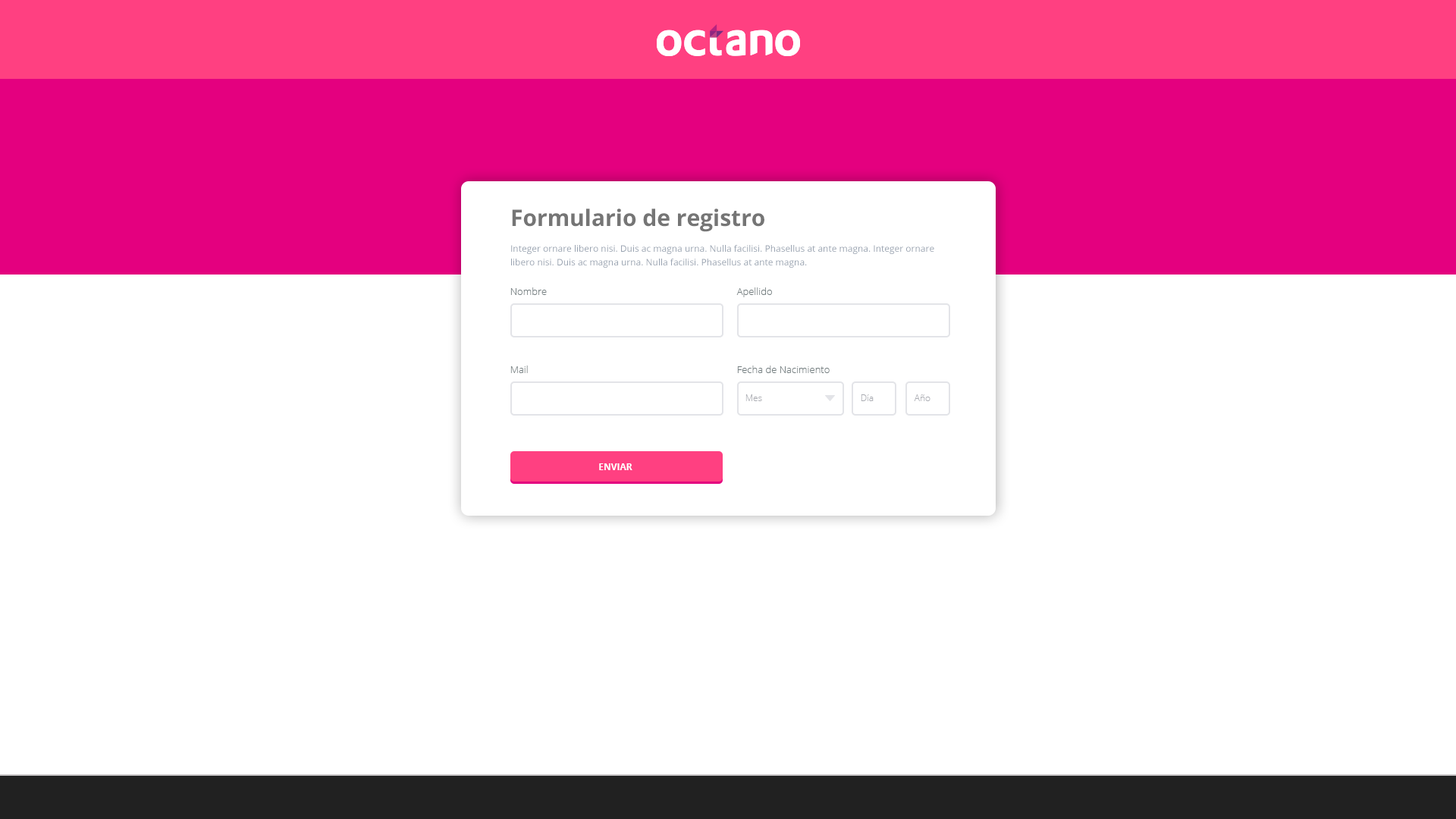
<style>
.page{position:relative;width:1456px;height:819px;background:#ffffff}
.page>*{position:absolute;margin:0}
.t1{font:22.7px "OpenSans-Bold";color:#757575}
.t2{font:9.1px/13.6px "OpenSans";color:#99a3b1}
.t3{font:9.9px "OpenSans-Light";color:#768082}
.t4{font:9.1px "OpenSans-Light";color:#abadb3}
.t5{font:9.1px "OpenSans-Bold";color:#ffffff;text-transform:uppercase}
</style>
<div class="page">
<p class="t1" style="left:512px;top:209px;width:252px;height:23px">Formulario de registro</p>
<p class="t2" style="left:511px;top:245px;width:423px;height:23px">Integer ornare libero nisi. Duis ac magna urna. Nulla facilisi. Phasellus at ante magna. Integer ornare libero nisi. Duis ac magna urna. Nulla facilisi. Phasellus at ante magna.</p>
<p class="t3" style="left:510px;top:287px;width:37px;height:8px">Nombre</p>
<p class="t3" style="left:736px;top:287px;width:36px;height:10px">Apellido</p>
<p class="t3" style="left:510px;top:366px;width:18px;height:7px">Mail</p>
<p class="t3" style="left:737px;top:366px;width:93px;height:7px">Fecha de Nacimiento</p>
<p class="t4" style="left:745px;top:394px;width:17px;height:7px">Mes</p>
<p class="t4" style="left:861px;top:394px;width:13px;height:7px">Día</p>
<p class="t4" style="left:914px;top:394px;width:16px;height:7px">Año</p>
<p class="t5" style="left:599px;top:463px;width:33px;height:7px">ENVIAR</p>
</div>
